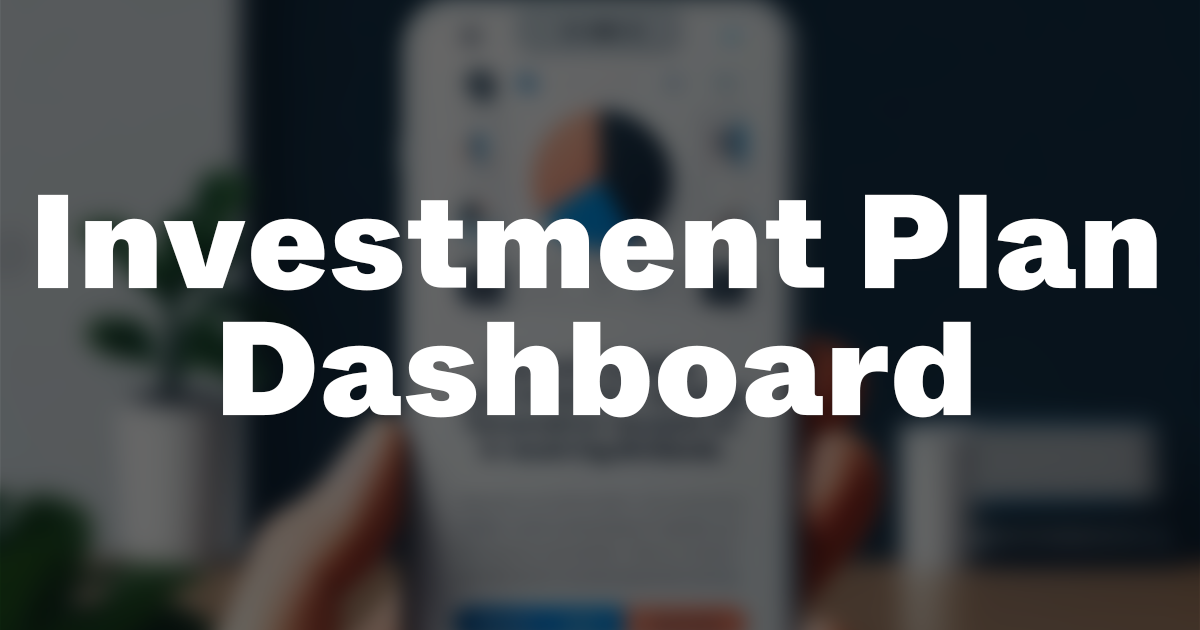
<style>
.page{position:relative;width:1200px;height:630px}
.page>*{position:absolute;margin:0}
.t1{font:132.6px/127.3px "Whyte-Black";letter-spacing:0.02em;color:#ffffff}
</style>
<div class="page">
<p class="t1" style="left:38px;top:194px;width:1119px;height:224px;text-align:center">Investment Plan<br>Dashboard</p>
</div>
